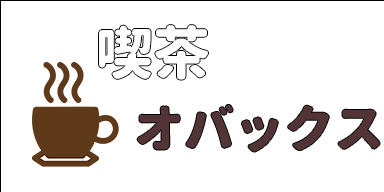
<style>
.page{position:relative;width:384px;height:192px;background:#ffffff}
.page>*{position:absolute;margin:0}
.t1{font:57px "GenJyuuGothic-Monospace-Heavy";color:#ffffff}
.t2{font:50px "GenJyuuGothic-Monospace-Heavy";color:#523437}
</style>
<div class="page">
<p class="t1" style="left:99px;top:25px;width:109px;height:55px">喫茶</p>
<p class="t2" style="left:137px;top:105px;width:243px;height:47px">オバックス</p>
</div>
